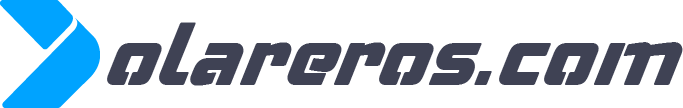
<style>
.page{position:relative;width:683px;height:108px;background:#ffffff}
.page>*{position:absolute;margin:0}
.t1{font:81.3px "PervitinaDex";color:#3f4254}
</style>
<div class="page">
<p class="t1" style="left:107px;top:22px;width:576px;height:64px">olareros.com</p>
</div>
